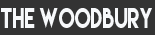
<style>
.page{position:relative;width:155px;height:35px;background:#333333}
.page>*{position:absolute;margin:0}
.t1{font:25.5px "LemonMilk";color:#f7f9fb;scale:0.76 1}
</style>
<div class="page">
<p class="t1" style="left:1px;top:7px;width:151px;height:21px">the woodbury</p>
</div>
